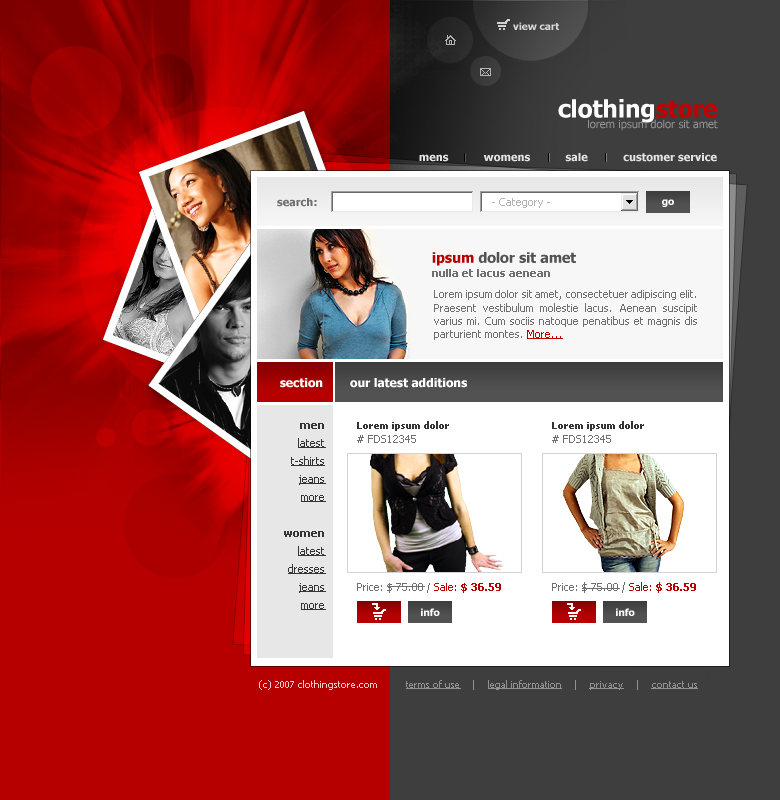
<style>
.page{position:relative;width:780px;height:800px}
.page>*{position:absolute;margin:0}
.t1{font:10px "Tahoma-Bold";color:#d5d5d5}
.t2{font:24px "Tahoma-Bold";color:#ffffff}
.t3{font:24px "Tahoma-Bold";color:#c20000}
.t4{font:11px "Tahoma";color:#949494}
.t5{font:11px "Tahoma-Bold";color:#e2e2e2}
.t6{font:11px "Tahoma-Bold";color:#6f6f6f}
.t7{font:11px "Tahoma";color:#b2b2b2}
.t8{font:10px "Tahoma-Bold";color:#ffffff}
.t9{font:14px "Tahoma-Bold";color:#525252}
.t10{font:14px "Tahoma-Bold";color:#b60000}
.t11{font:11px "Tahoma";color:#6f6f6f}
.t12{font:11px "Tahoma";color:#c20000;text-decoration:underline}
.t13{font:12px "Tahoma-Bold";color:#ffffff}
.t14{font:11px/18px "Tahoma";color:#343434;text-decoration:underline}
.t15{font:11px/18px "Tahoma-Bold";color:#343434}
.t16{font:10px/14px "Tahoma-Bold";color:#343434}
.t17{font:11px/14px "Tahoma";color:#6f6f6f}
.t18{font:11px "Tahoma";color:#b60000}
.t19{font:11px "Tahoma-Bold";color:#b60000}
.t20{font:10px "Tahoma";color:#f0cccc}
.t21{font:10px "Tahoma";color:#929292;text-decoration:underline}
.t22{font:10px "Tahoma";color:#929292}
</style>
<div class="page">
<p class="t1" style="left:513px;top:22px;width:46px;height:8px">view cart</p>
<p class="t2" style="left:558px;top:99px;width:159px;height:24px">clothing<span class="t3">store</span></p>
<p class="t4" style="left:588px;top:119px;width:130px;height:12px">lorem ipsum dolor sit amet</p>
<p class="t5" style="left:419px;top:153px;width:298px;height:9px">mens           womens           sale           customer service</p>
<p class="t6" style="left:277px;top:198px;width:40px;height:9px">search:</p>
<p class="t7" style="left:492px;top:198px;width:58px;height:10px">- Category -</p>
<p class="t8" style="left:662px;top:199px;width:12px;height:8px">go</p>
<p class="t9" style="left:432px;top:252px;width:144px;height:14px"><span class="t10">ipsum </span>dolor sit amet</p>
<p class="t6" style="left:432px;top:269px;width:118px;height:8px">nulla et lacus aenean</p>
<p class="t11" style="left:434px;top:290px;width:263px;height:50px;text-align:justify">Lorem ipsum dolor sit amet, consectetuer adipiscing elit. Praesent vestibulum molestie lacus. Aenean suscipit varius mi. Cum sociis natoque penatibus et magnis dis parturient montes. <span class="t12">More...</span></p>
<p class="t13" style="left:280px;top:378px;width:43px;height:10px">section</p>
<p class="t13" style="left:350px;top:378px;width:117px;height:10px">our latest additions</p>
<p class="t14" style="left:284px;top:423px;width:42px;height:187px;text-align:right"><span class="t15">men<br></span>latest<br>t-shirts<br>jeans<br>more<br><br><span class="t15">women<br></span>latest<br>dresses<br>jeans<br>more</p>
<p class="t16" style="left:357px;top:421px;width:92px;height:22px">Lorem ipsum dolor<br><span class="t17"># FDS12345</span></p>
<p class="t16" style="left:552px;top:421px;width:92px;height:22px">Lorem ipsum dolor<br><span class="t17"># FDS12345</span></p>
<p class="t11" style="left:552px;top:582px;width:144px;height:11px">Price: $ 75.00 / <span class="t18">Sale: </span><span class="t19">$ 36.59</span></p>
<p class="t11" style="left:357px;top:583px;width:144px;height:10px">Price: $ 75.00 / <span class="t18">Sale: </span><span class="t19">$ 36.59</span></p>
<p class="t8" style="left:421px;top:608px;width:19px;height:8px">info</p>
<p class="t8" style="left:616px;top:608px;width:19px;height:8px">info</p>
<p class="t20" style="left:259px;top:680px;width:118px;height:10px">(c) 2007 clothingstore.com</p>
<p class="t21" style="left:406px;top:680px;width:292px;height:10px">terms of use<span class="t22">    |    </span>legal information<span class="t22">    |    </span>privacy<span class="t22">    |    </span>contact us</p>
</div>
